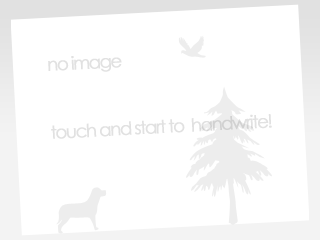
<style>
.page{position:relative;width:320px;height:240px;background:#ffffff}
.page>*{position:absolute;margin:0}
.t1{font:18px "CenturyGothic";letter-spacing:-0.1em;color:#e1e1e1;font-weight:bold}
</style>
<div class="page">
<p class="t1" style="left:48px;top:56px;width:74px;height:16px;rotate:-3deg">no image</p>
<p class="t1" style="left:51px;top:114px;width:221px;height:25px;rotate:-3deg">touch and start to  handwrite!</p>
</div>
